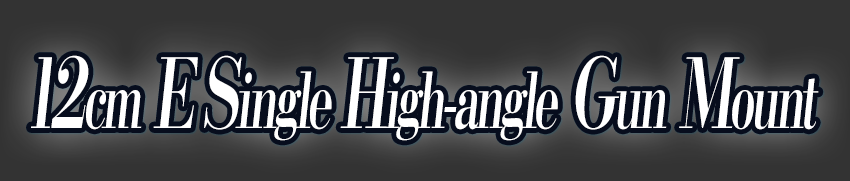
<style>
.page{position:relative;width:850px;height:181px;background:#333333}
.page>*{position:absolute;margin:0}
.t1{font:76.8px "KochoStd-Heavy";letter-spacing:-0.08em;color:#ffffff;font-style:italic;scale:0.61 1}
.t2{font:96px "KochoStd-Heavy";letter-spacing:-0.08em;color:#ffffff;font-style:italic;scale:0.61 1}
</style>
<div class="page">
<p class="t1" style="left:31px;top:55px;width:788px;height:86px"><span class="t2">12</span>cm<span class="t2"> E S</span>ingle <span class="t2">H</span>igh-angle<span class="t2"> G</span>un<span class="t2"> M</span>ount</p>
</div>
